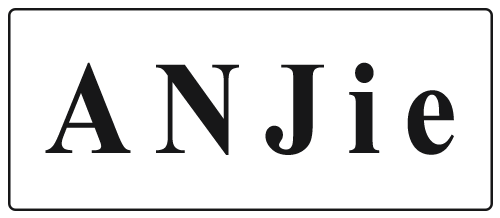
<style>
.page{position:relative;width:500px;height:218px;background:#ffffff}
.page>*{position:absolute;margin:0}
.t1{font:165px "Aparajita-Bold";letter-spacing:0.15em;color:#171718;scale:0.91 1}
</style>
<div class="page">
<p class="t1" style="left:45px;top:62px;width:409px;height:93px">ANJie</p>
</div>
